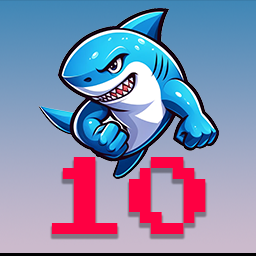
<style>
.page{position:relative;width:256px;height:256px}
.page>*{position:absolute;margin:0}
.t1{font:87.2px "PressStart2P-Regular";color:#fe0042}
</style>
<div class="page">
<p class="t1" style="left:51px;top:157px;width:155px;height:77px">10</p>
</div>
